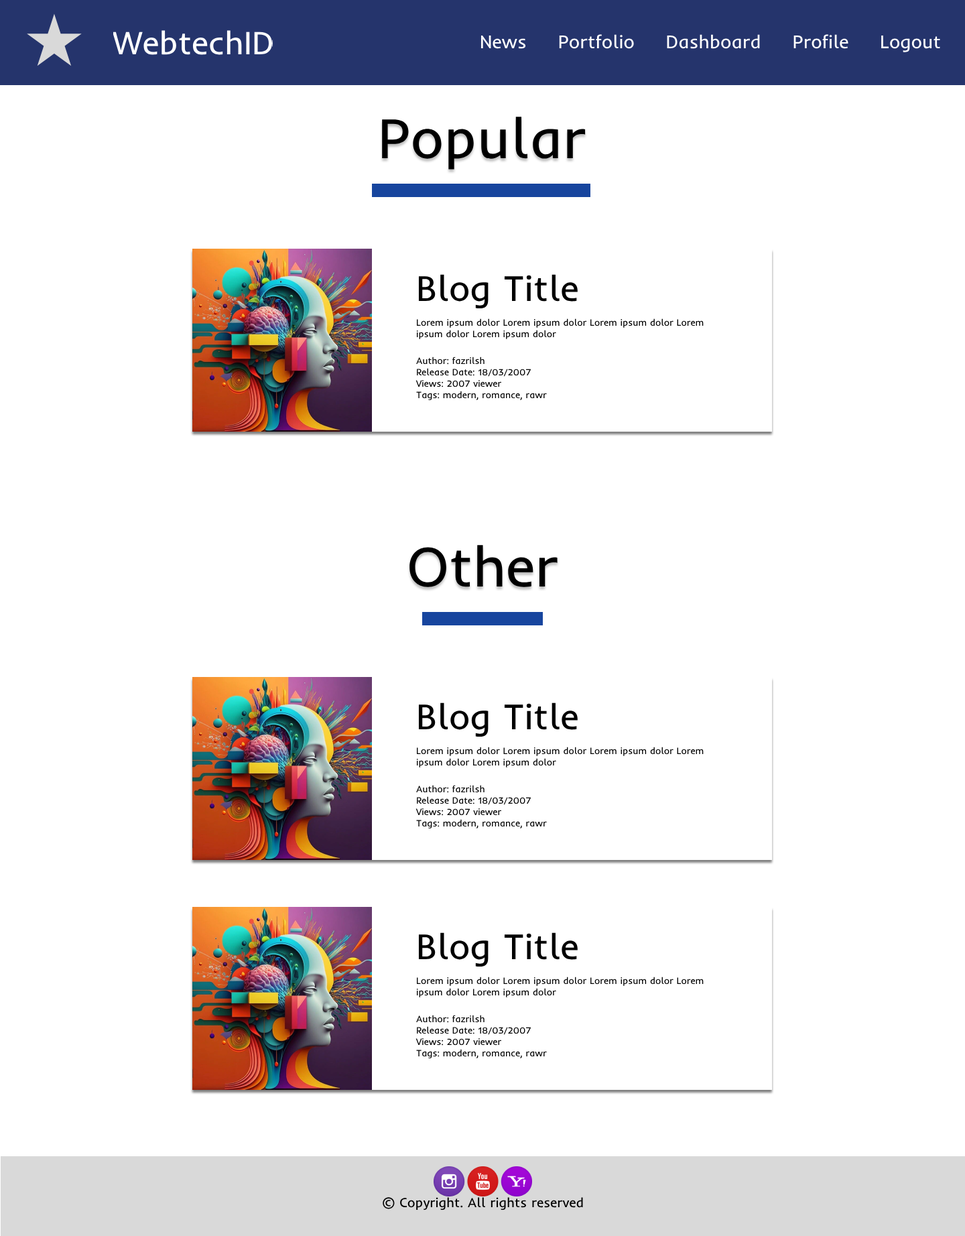
<style>
.page{position:relative;width:965px;height:1236px;background:#ffffff}
.page>*{position:absolute;margin:0}
.t1{font:32.8px "Inder-Regular";color:#ffffff}
.t2{font:18.8px "Inder-Regular";color:#ffffff}
.t3{font:57px "Inder-Regular";color:#000000}
.t4{font:36.2px "Inder-Regular";color:#000000}
.t5{font:9.4px "Inder-Regular";color:#000000}
.t6{font:13.4px "Inder-Regular";color:#000000}
.t7{font:14.7px "Inder-Regular";color:#000000}
</style>
<div class="page">
<p class="t1" style="left:113px;top:30px;width:160px;height:25px">WebtechID</p>
<p class="t2" style="left:480px;top:34px;width:460px;height:18px">News     Portfolio     Dashboard     Profile     Logout</p>
<p class="t3" style="left:382px;top:117px;width:204px;height:53px">Popular</p>
<p class="t4" style="left:418px;top:274px;width:160px;height:34px">Blog Title</p>
<p class="t5" style="left:416px;top:318px;width:288px;height:21px">Lorem ipsum dolor Lorem ipsum dolor Lorem ipsum dolor Lorem ipsum dolor Lorem ipsum dolor</p>
<p class="t5" style="left:415px;top:357px;width:132px;height:43px">Author: fazrilsh<br>Release Date: 18/03/2007<br>Views: 2007 viewer<br>Tags: modern, romance, rawr</p>
<p class="t3" style="left:409px;top:545px;width:149px;height:42px">Other</p>
<p class="t4" style="left:418px;top:702px;width:160px;height:34px">Blog Title</p>
<p class="t5" style="left:416px;top:747px;width:288px;height:20px">Lorem ipsum dolor Lorem ipsum dolor Lorem ipsum dolor Lorem ipsum dolor Lorem ipsum dolor</p>
<p class="t5" style="left:415px;top:785px;width:132px;height:43px">Author: fazrilsh<br>Release Date: 18/03/2007<br>Views: 2007 viewer<br>Tags: modern, romance, rawr</p>
<p class="t4" style="left:418px;top:932px;width:160px;height:34px">Blog Title</p>
<p class="t5" style="left:416px;top:976px;width:288px;height:21px">Lorem ipsum dolor Lorem ipsum dolor Lorem ipsum dolor Lorem ipsum dolor Lorem ipsum dolor</p>
<p class="t5" style="left:415px;top:1015px;width:132px;height:43px">Author: fazrilsh<br>Release Date: 18/03/2007<br>Views: 2007 viewer<br>Tags: modern, romance, rawr</p>
<p class="t6" style="left:383px;top:1197px;width:200px;height:13px;text-align:center"><span class="t7">© </span>Copyright. All rights reserved<br>Designed by : fazril</p>
</div>
